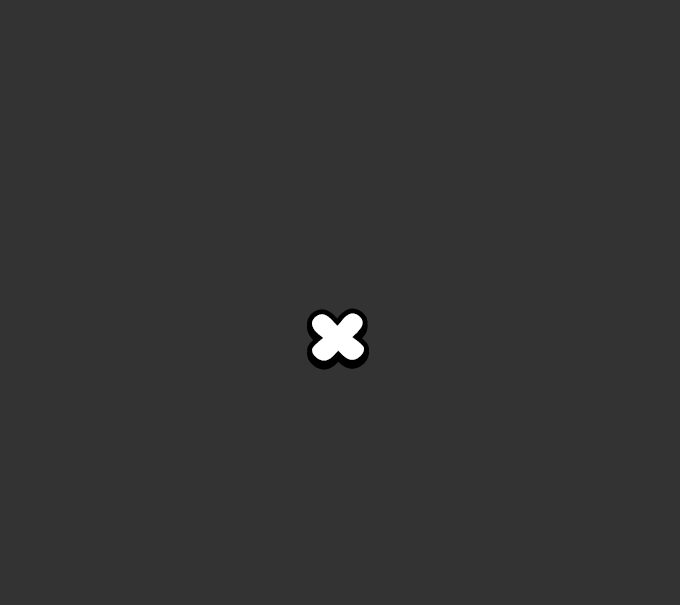
<style>
.page{position:relative;width:680px;height:605px;background:#333333}
.page>*{position:absolute;margin:0}
.t1{font:97.2px "Coiny-Regular";color:#ffffff}
</style>
<div class="page">
<p class="t1" style="left:312px;top:313px;width:52px;height:48px;rotate:-2deg">x</p>
</div>
